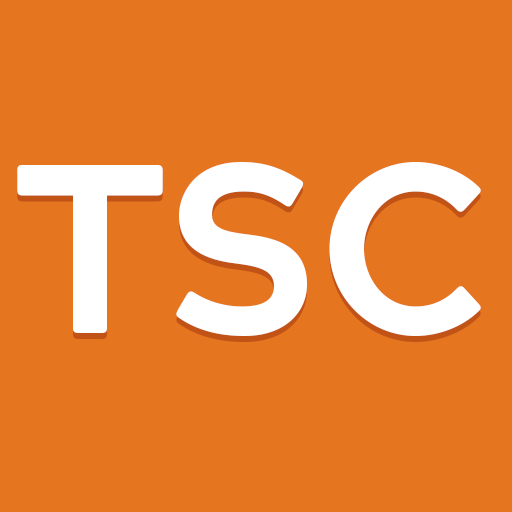
<style>
.page{position:relative;width:512px;height:512px;background:#e5751f}
.page>*{position:absolute;margin:0}
.t1{font:240px "AcherusGrotesque-ExtraBold";color:#ffffff}
</style>
<div class="page">
<p class="t1" style="left:17px;top:162px;width:464px;height:174px">TSC</p>
</div>
